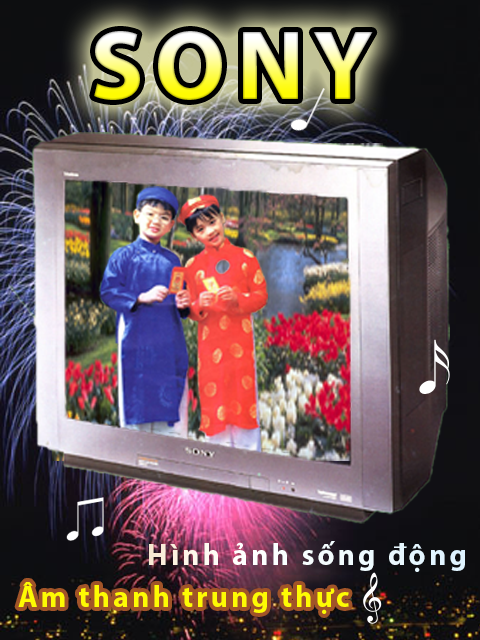
<style>
.page{position:relative;width:480px;height:640px}
.page>*{position:absolute;margin:0}
.t1{font:100px "MyriadPro-Bold";letter-spacing:0.1em}
.t2{font:30px "MyriadPro-Bold";letter-spacing:0.1em;color:#f6faff}
.t3{font:30px "MyriadPro-Bold";letter-spacing:0.1em;color:#fefb03}
</style>
<div class="page">
<p class="t1" style="left:94px;top:31px;width:279px;height:69px">SONY</p>
<p class="t2" style="left:149px;top:541px;width:316px;height:31px">Hình ảnh sống động</p>
<p class="t3" style="left:18px;top:582px;width:331px;height:32px">Âm thanh trung thực</p>
</div>
